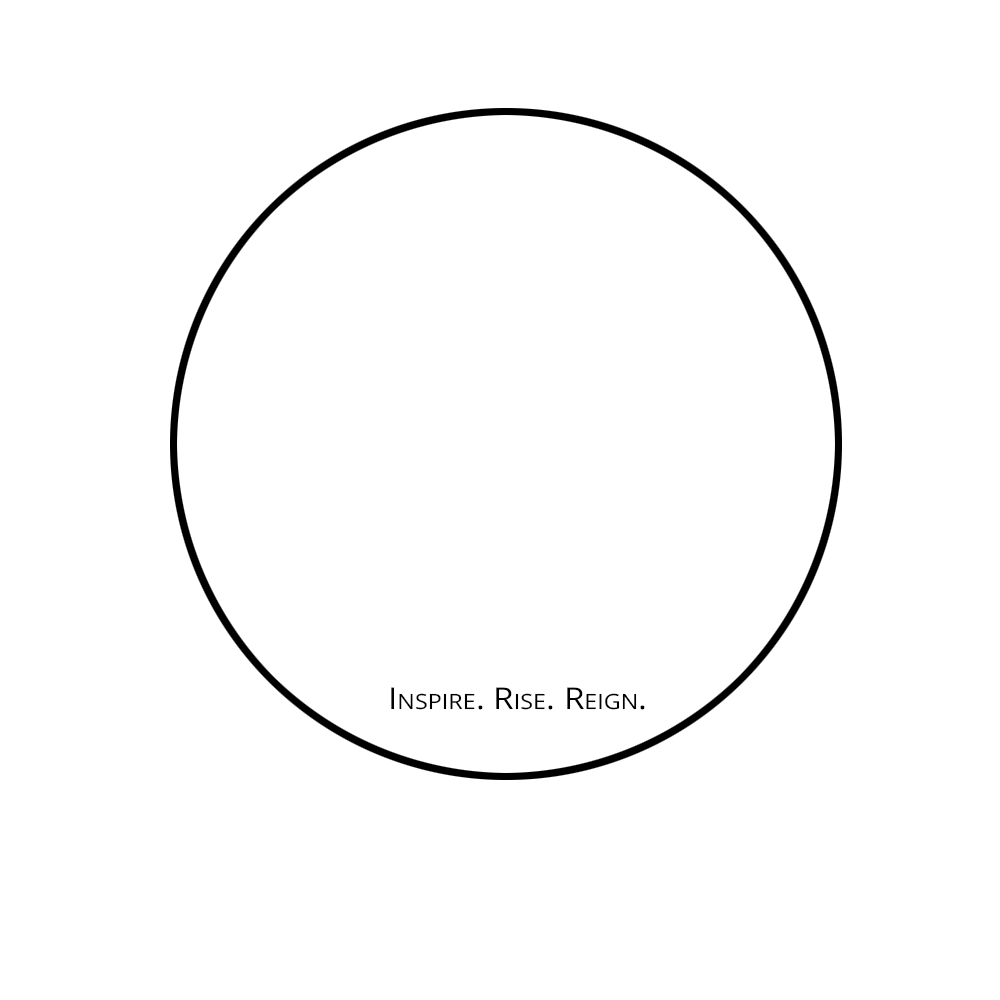
<style>
.page{position:relative;width:1000px;height:1000px;background:#ffffff}
.page>*{position:absolute;margin:0}
.t1{font:30px "OpenSans";color:#000000;font-variant:small-caps;scale:1.11 1}
</style>
<div class="page">
<p class="t1" style="left:391px;top:687px;width:254px;height:23px">Inspire. Rise. Reign.</p>
</div>
